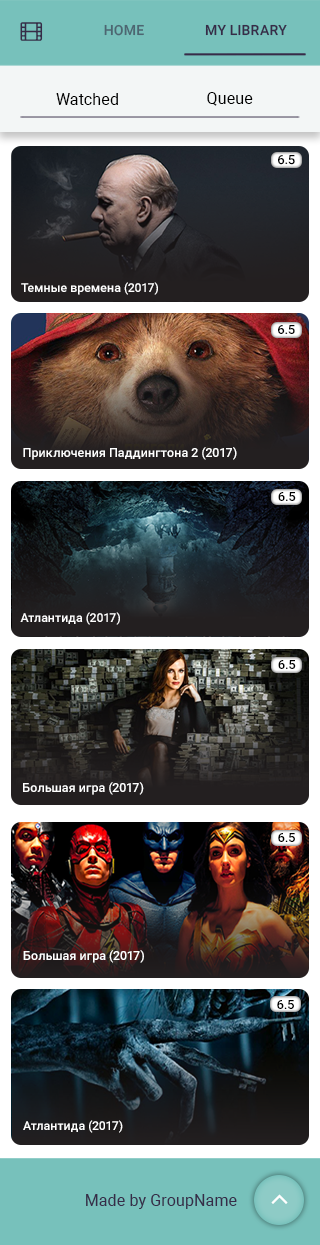
<style>
.page{position:relative;width:320px;height:1245px}
.page>*{position:absolute;margin:0}
.t1{font:14px "Roboto-Medium";letter-spacing:0.01em;color:#4d6671;text-transform:uppercase}
.t2{font:14px "Roboto-Medium";letter-spacing:0.01em;color:#372c48;text-transform:uppercase}
.t3{font:16px "Roboto-Regular";letter-spacing:0.01em;color:#000000}
.t4{font:12.8px "Roboto-Medium";color:#000000}
.t5{font:12.3px "Roboto-Medium";color:#ffffff}
.t6{font:12.5px "Roboto-Medium";color:#000000}
.t7{font:12.5px "Roboto-Medium";color:#ffffff}
.t8{font:16px "Roboto-Regular";letter-spacing:0.01em;color:#372c48}
</style>
<div class="page">
<p class="t1" style="left:104px;top:24px;width:40px;height:12px">HOME</p>
<p class="t2" style="left:205px;top:24px;width:82px;height:12px">my library</p>
<p class="t3" style="left:56px;top:93px;width:62px;height:12px">Watched</p>
<p class="t3" style="left:207px;top:92px;width:46px;height:14px">Queue</p>
<p class="t4" style="left:278px;top:155px;width:17px;height:10px">6.5</p>
<p class="t5" style="left:21px;top:282px;width:137px;height:13px">Темные времена (2017)</p>
<p class="t6" style="left:278px;top:325px;width:17px;height:9px">6.5</p>
<p class="t7" style="left:23px;top:447px;width:214px;height:13px">Приключения Паддингтона 2 (2017)</p>
<p class="t6" style="left:278px;top:492px;width:18px;height:9px">6.5</p>
<p class="t5" style="left:20px;top:612px;width:100px;height:13px">Атлантида (2017)</p>
<p class="t6" style="left:278px;top:660px;width:18px;height:9px">6.5</p>
<p class="t7" style="left:23px;top:782px;width:121px;height:13px">Большая игра (2017)</p>
<p class="t6" style="left:278px;top:833px;width:17px;height:9px">6.5</p>
<p class="t7" style="left:23px;top:950px;width:121px;height:13px">Большая игра (2017)</p>
<p class="t6" style="left:277px;top:1000px;width:17px;height:9px">6.5</p>
<p class="t5" style="left:23px;top:1120px;width:100px;height:13px">Атлантида (2017)</p>
<p class="t8" style="left:86px;top:1194px;width:151px;height:15px">Made by GroupName</p>
</div>
